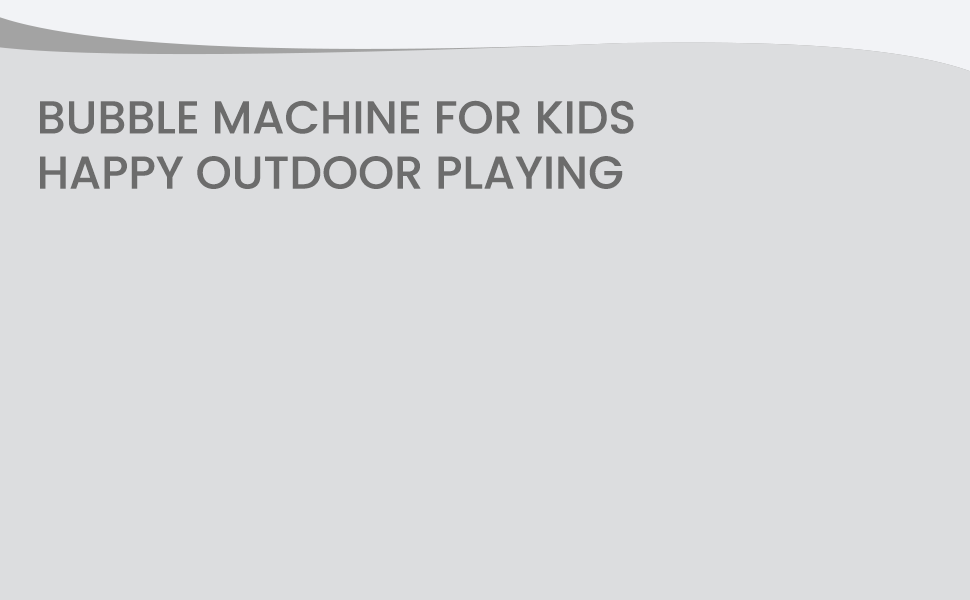
<style>
.page{position:relative;width:970px;height:600px;background:#dcdddf}
.page>*{position:absolute;margin:0}
.t1{font:46px "Poppins-Medium";color:#6c6c6c;text-transform:uppercase}
</style>
<div class="page">
<p class="t1" style="left:40px;top:100px;width:594px;height:89px">Bubble machine for kids<br>happy outdoor playing</p>
</div>
